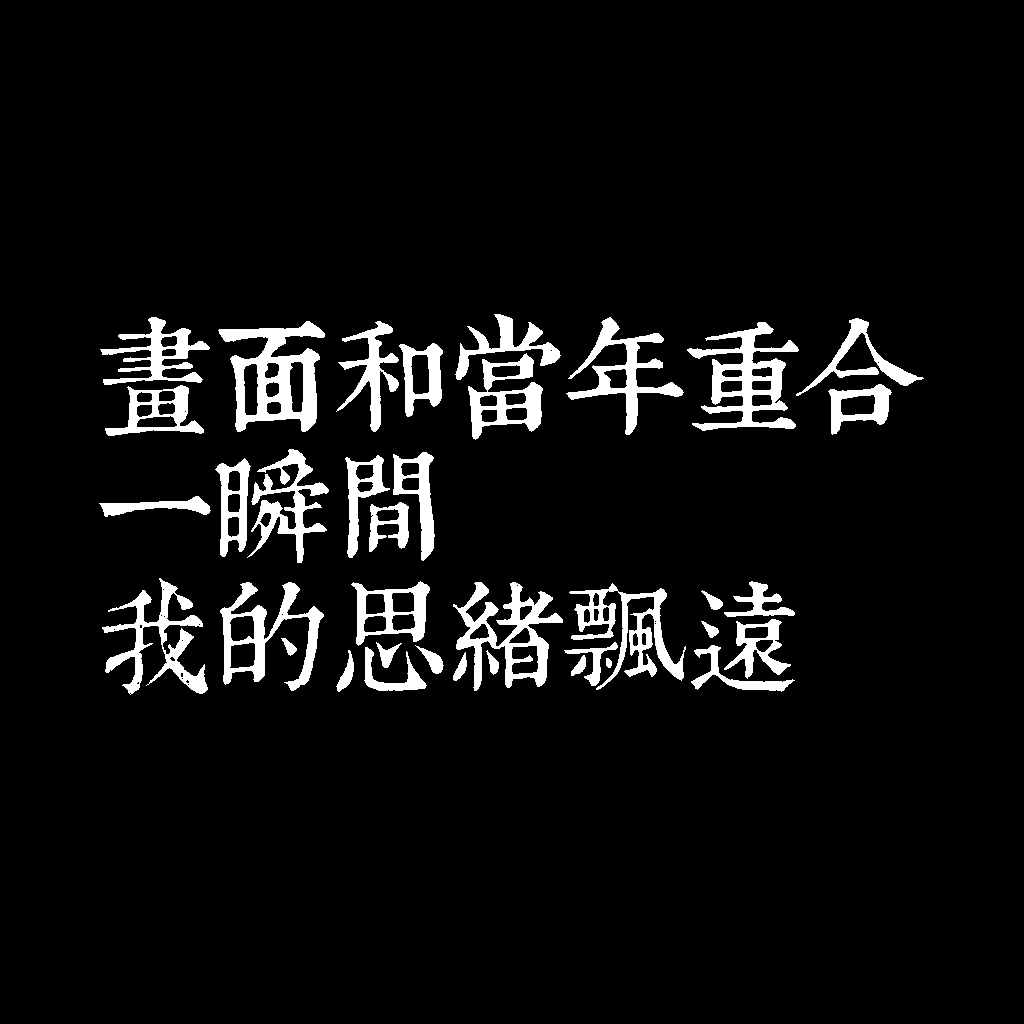
<style>
.page{position:relative;width:1024px;height:1024px;background:#000000}
.page>*{position:absolute;margin:0}
.t1{font:120px/130px "TpldKhangXiDictTrial";letter-spacing:-0.02em;color:#ffffff}
</style>
<div class="page">
<p class="t1" style="left:99px;top:314px;width:825px;height:381px">畫面和當年重合<br>一瞬間<br>我的思緒飄遠</p>
</div>
